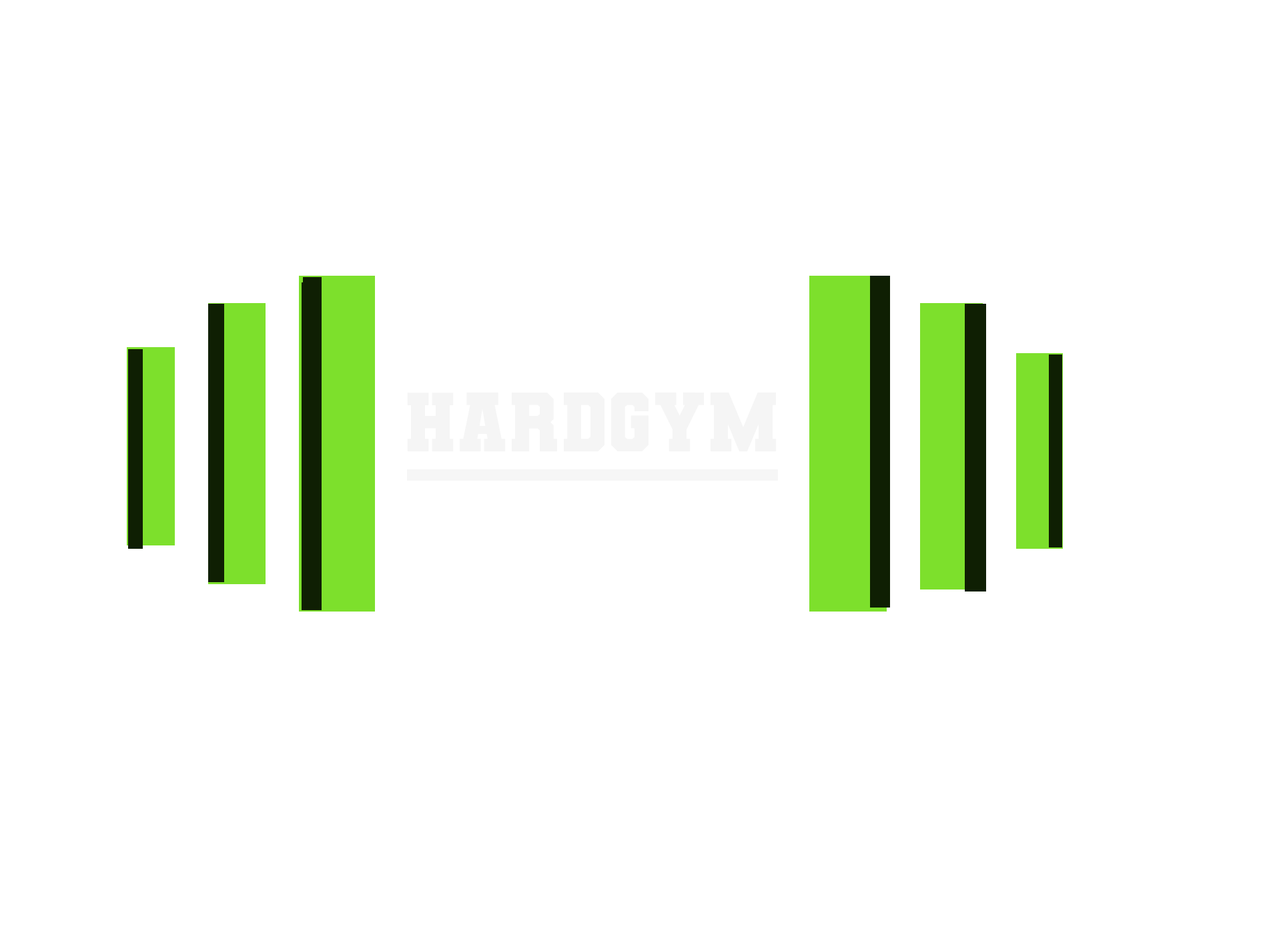
<style>
.page{position:relative;width:1261px;height:946px;background:#ffffff}
.page>*{position:absolute;margin:0}
.t1{font:83.4px "VarsityTeamBold";color:#f5f5f5}
</style>
<div class="page">
<p class="t1" style="left:407px;top:392px;width:370px;height:60px">HardGym</p>
</div>
